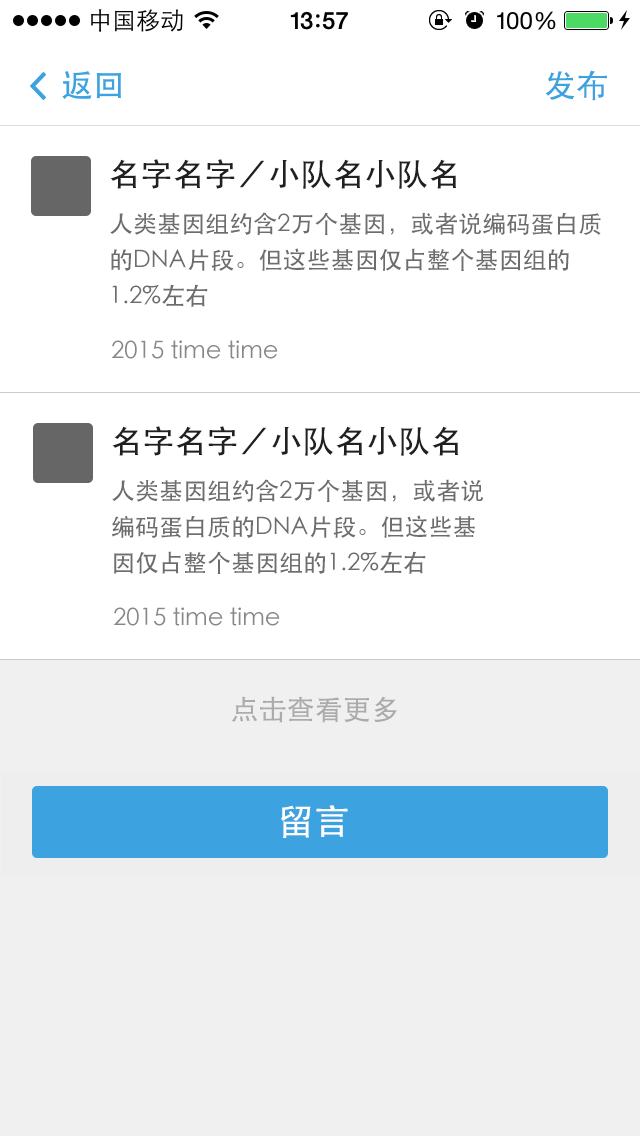
<style>
.page{position:relative;width:640px;height:1136px;background:#ffffff}
.page>*{position:absolute;margin:0}
.t1{font:32px "STHeiti";color:#3ca2e0}
.t2{font:32px "STHeiti";color:#202020}
.t3{font:24px/36px "STHeiti";color:#6d6d6d}
.t4{font:24px "STHeiti";color:#888888}
.t5{font:28px "STHeiti";color:#ababab}
.t6{font:36px "STHeiti";color:#ffffff}
</style>
<div class="page">
<p class="t1" style="left:545px;top:70px;width:62px;height:31px">发布</p>
<p class="t2" style="left:110px;top:159px;width:346px;height:30px">名字名字／小队名小队名</p>
<p class="t3" style="left:110px;top:212px;width:491px;height:95px">人类基因组约含2万个基因，或者说编码蛋白质<br>的DNA片段。但这些基因仅占整个基因组的<br>1.2%左右</p>
<p class="t4" style="left:111px;top:340px;width:167px;height:19px">2015 time time</p>
<p class="t2" style="left:112px;top:426px;width:346px;height:30px">名字名字／小队名小队名</p>
<p class="t3" style="left:112px;top:479px;width:372px;height:95px">人类基因组约含2万个基因，或者说<br>编码蛋白质的DNA片段。但这些基<br>因仅占整个基因组的1.2%左右</p>
<p class="t4" style="left:113px;top:607px;width:167px;height:19px">2015 time time</p>
<p class="t5" style="left:232px;top:696px;width:165px;height:27px">点击查看更多</p>
<p class="t6" style="left:281px;top:805px;width:67px;height:33px">留言</p>
</div>
